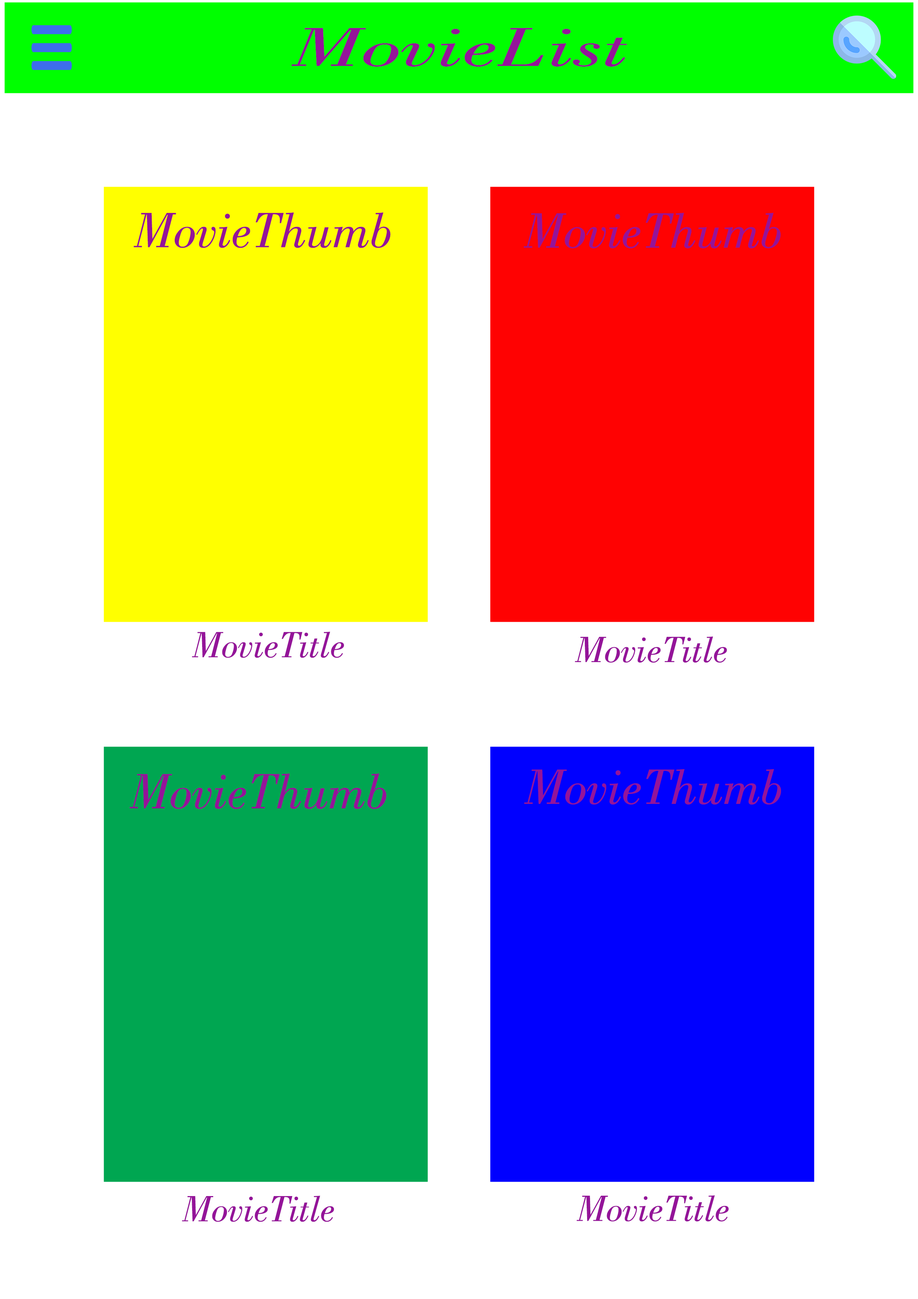
<style>
.page{position:relative;width:918px;height:1299px;background:#ffffff}
.page>*{position:absolute;margin:0}
.t1{font:58px "BodoniBT-BookItalic";color:#941499;scale:1.58 1}
.t2{font:52.4px "BodoniBT-BookItalic";color:#941499}
.t3{font:38.6px "BodoniBT-BookItalic";color:#941499}
</style>
<div class="page">
<p class="t1" style="left:292px;top:28px;width:335px;height:39px">MovieList</p>
<p class="t2" style="left:134px;top:212px;width:257px;height:36px">MovieThumb</p>
<p class="t2" style="left:524px;top:213px;width:257px;height:35px">MovieThumb</p>
<p class="t3" style="left:192px;top:632px;width:152px;height:26px">MovieTitle</p>
<p class="t3" style="left:575px;top:636px;width:152px;height:27px">MovieTitle</p>
<p class="t2" style="left:130px;top:773px;width:257px;height:36px">MovieThumb</p>
<p class="t2" style="left:524px;top:769px;width:257px;height:35px">MovieThumb</p>
<p class="t3" style="left:182px;top:1195px;width:152px;height:27px">MovieTitle</p>
<p class="t3" style="left:577px;top:1195px;width:152px;height:26px">MovieTitle</p>
</div>
